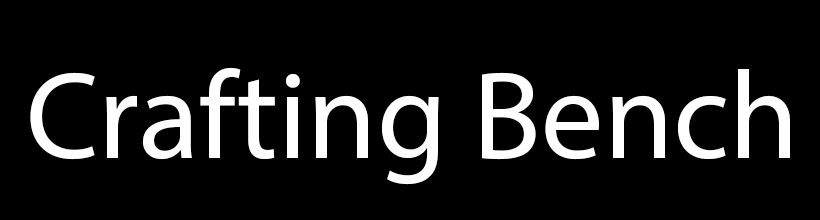
<style>
.page{position:relative;width:820px;height:220px;background:#000000}
.page>*{position:absolute;margin:0}
.t1{font:125px "MyriadPro-Regular";color:#ffffff}
</style>
<div class="page">
<p class="t1" style="left:30px;top:67px;width:760px;height:118px">Crafting Bench</p>
</div>
